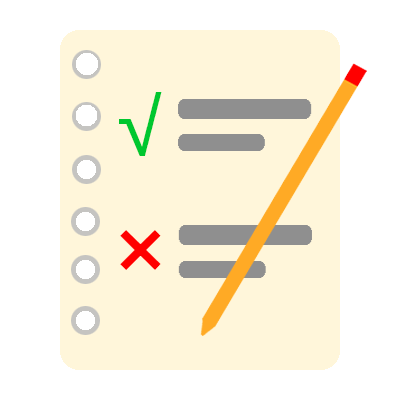
<style>
.page{position:relative;width:400px;height:400px;background:#fff6da}
.page>*{position:absolute;margin:0}
.t1{font:80px "MicrosoftYaHeiUI";color:#00c72f}
.t2{font:80px "MicrosoftYaHeiUI-Bold";color:#ff0000}
</style>
<div class="page">
<p class="t1" style="left:119px;top:92px;width:43px;height:64px">√</p>
<p class="t2" style="left:120px;top:230px;width:41px;height:40px">×</p>
</div>
